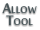
<style>
.page{position:relative;width:40px;height:30px;background:#ffffff}
.page>*{position:absolute;margin:0}
.t1{font:21px/12px "MoolBoran";color:#485559;font-variant:small-caps}
</style>
<div class="page">
<p class="t1" style="left:2px;top:3px;width:35px;height:22px;text-align:center">Allow<br>Tool</p>
</div>
